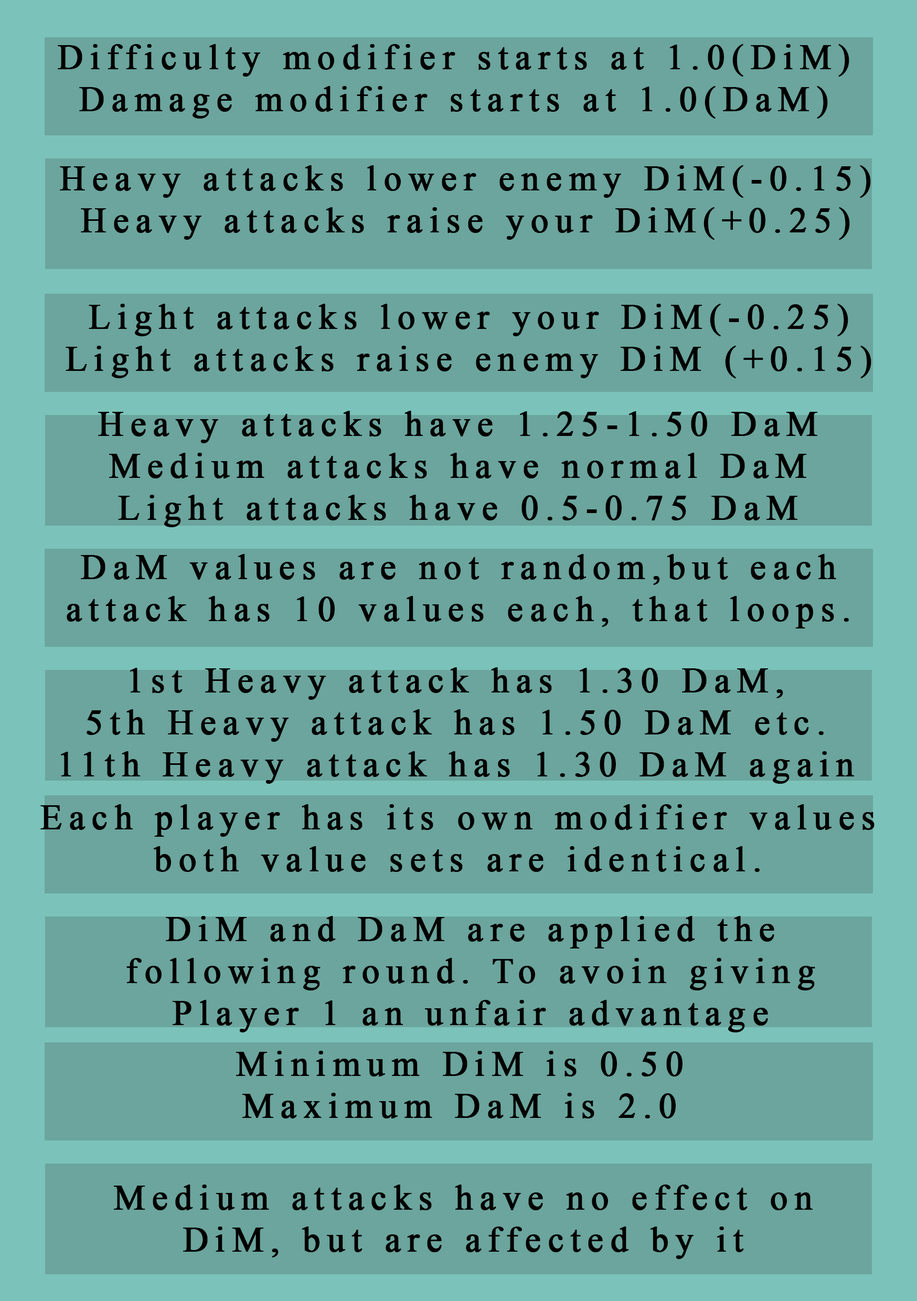
<style>
.page{position:relative;width:917px;height:1301px;background:#6ba59d}
.page>*{position:absolute;margin:0}
.t1{font:35px "TimesNewRomanPSMT";letter-spacing:0.18em;color:#000000;font-weight:bold}
</style>
<div class="page">
<p class="t1" style="left:58px;top:44px;width:791px;height:75px;text-align:center">Difficulty modifier starts at 1.0(DiM)<br>Damage modifier starts at 1.0(DaM)</p>
<p class="t1" style="left:60px;top:165px;width:811px;height:75px;text-align:center">Heavy attacks lower enemy DiM(-0.15)<br>Heavy attacks raise your DiM(+0.25)</p>
<p class="t1" style="left:66px;top:304px;width:805px;height:74px;text-align:center">Light attacks lower your DiM(-0.25)<br>Light attacks raise enemy DiM (+0.15)</p>
<p class="t1" style="left:98px;top:411px;width:720px;height:116px;text-align:center">Heavy attacks have 1.25-1.50 DaM<br>Medium attacks have normal DaM<br>Light attacks have 0.5-0.75 DaM</p>
<p class="t1" style="left:67px;top:554px;width:782px;height:74px;text-align:center">DaM values are not random,but each attack has 10 values each, that loops.</p>
<p class="t1" style="left:61px;top:667px;width:793px;height:117px;text-align:center">1st Heavy attack has 1.30 DaM,<br>5th Heavy attack has 1.50 DaM etc.<br>11th Heavy attack has 1.30 DaM again</p>
<p class="t1" style="left:40px;top:804px;width:834px;height:68px;text-align:center">Each player has its own modifier values<br>both value sets are identical.</p>
<p class="t1" style="left:126px;top:916px;width:689px;height:116px;text-align:center">DiM and DaM are applied the following round. To avoin giving Player 1 an unfair advantage</p>
<p class="t1" style="left:236px;top:1051px;width:446px;height:67px;text-align:center">Minimum DiM is 0.50<br>Maximum DaM is 2.0</p>
<p class="t1" style="left:114px;top:1184px;width:698px;height:75px;text-align:center">Medium attacks have no effect on DiM, but are affected by it</p>
</div>
